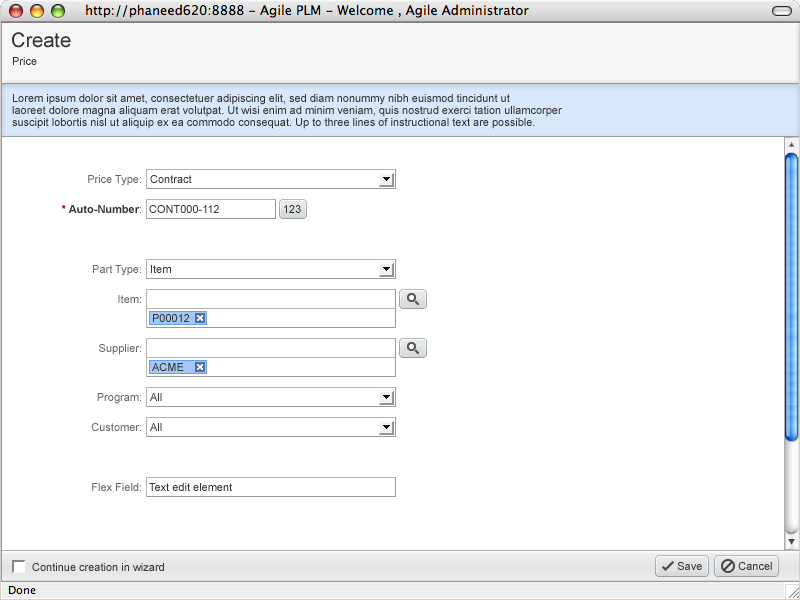
<style>
.page{position:relative;width:800px;height:600px;background:#ffffff}
.page>*{position:absolute;margin:0}
.t1{font:20px "ArialMT";color:#333333}
.t2{font:11px "ArialMT";color:#333333}
.t3{font:11px/12px "ArialMT";color:#333333}
.t4{font:11px "ArialMT";color:#666666}
.t5{font:11px "Arial-BoldMT";color:#333333}
.t6{font:11px "Arial-BoldMT";color:#990000}
</style>
<div class="page">
<p class="t1" style="left:12px;top:32px;width:59px;height:16px">Create</p>
<p class="t2" style="left:13px;top:57px;width:24px;height:8px">Price</p>
<p class="t3" style="left:12px;top:94px;width:550px;height:35px">Lorem ipsum dolor sit amet, consectetuer adipiscing elit, sed diam nonummy nibh euismod tincidunt ut <br>laoreet dolore magna aliquam erat volutpat. Ut wisi enim ad minim veniam, quis nostrud exerci tation ullamcorper <br>suscipit lobortis nisl ut aliquip ex ea commodo consequat. Up to three lines of instructional text are possible.</p>
<p class="t4" style="left:88px;top:175px;width:53px;height:11px">Price Type:</p>
<p class="t2" style="left:150px;top:175px;width:42px;height:8px">Contract</p>
<p class="t5" style="left:61px;top:205px;width:80px;height:8px"><span class="t6">*</span> Auto-Number<span class="t4">:</span></p>
<p class="t2" style="left:149px;top:205px;width:70px;height:8px">CONT000-112</p>
<p class="t2" style="left:284px;top:205px;width:17px;height:8px">123</p>
<p class="t4" style="left:93px;top:265px;width:48px;height:11px">Part Type:</p>
<p class="t2" style="left:151px;top:265px;width:20px;height:8px">Item</p>
<p class="t4" style="left:118px;top:295px;width:23px;height:8px">Item:</p>
<p class="t2" style="left:153px;top:314px;width:36px;height:8px">P00012</p>
<p class="t4" style="left:99px;top:344px;width:42px;height:11px">Supplier:</p>
<p class="t2" style="left:152px;top:363px;width:32px;height:8px">ACME</p>
<p class="t4" style="left:97px;top:393px;width:44px;height:11px">Program:</p>
<p class="t2" style="left:150px;top:393px;width:12px;height:8px">All</p>
<p class="t4" style="left:91px;top:423px;width:50px;height:8px">Customer:</p>
<p class="t2" style="left:150px;top:423px;width:12px;height:8px">All</p>
<p class="t4" style="left:92px;top:483px;width:49px;height:8px">Flex Field:</p>
<p class="t2" style="left:149px;top:483px;width:83px;height:8px">Text edit element</p>
<p class="t2" style="left:32px;top:563px;width:132px;height:8px">Continue creation in wizard</p>
<p class="t2" style="left:677px;top:562px;width:25px;height:8px">Save</p>
<p class="t2" style="left:738px;top:562px;width:34px;height:8px">Cancel</p>
</div>
